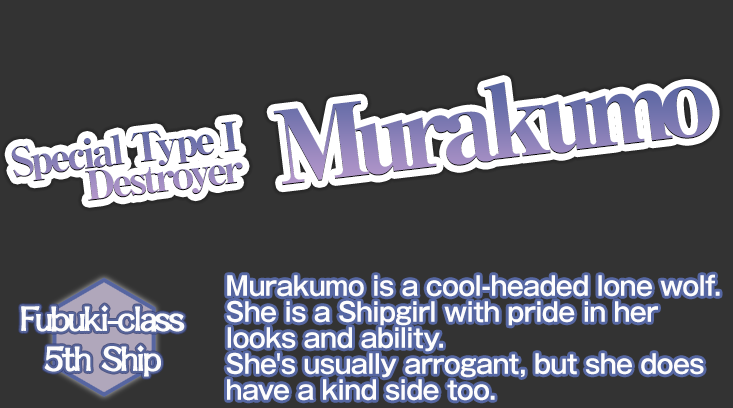
<style>
.page{position:relative;width:733px;height:408px;background:#333333}
.page>*{position:absolute;margin:0}
.t1{font:26px/26px "GothicMB101Pro-DeBold";letter-spacing:-0.02em;color:#fdfdfd;scale:0.95 1}
.t2{font:40px/40px "DFLungMen-W9-WINP-BF";letter-spacing:-0.09em;color:#fdfdfd;font-weight:bold}
</style>
<div class="page">
<p class="t1" style="left:226px;top:274px;width:494px;height:127px">Murakumo is a cool-headed lone wolf. <br>She is a Shipgirl with pride in her <br>looks and ability.<br>She's usually arrogant, but she does<br>have a kind side too.</p>
<p class="t2" style="left:21px;top:305px;width:164px;height:72px;text-align:center">Fubuki-class<br>5th Ship</p>
</div>
